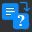
<style>
.page{position:relative;width:32px;height:32px;background:#333333}
.page>*{position:absolute;margin:0}
.t1{font:17px "TimesNewRomanPS-BoldMT";color:#ffffff}
</style>
<div class="page">
<p class="t1" style="left:17px;top:15px;width:8px;height:11px">?</p>
</div>
